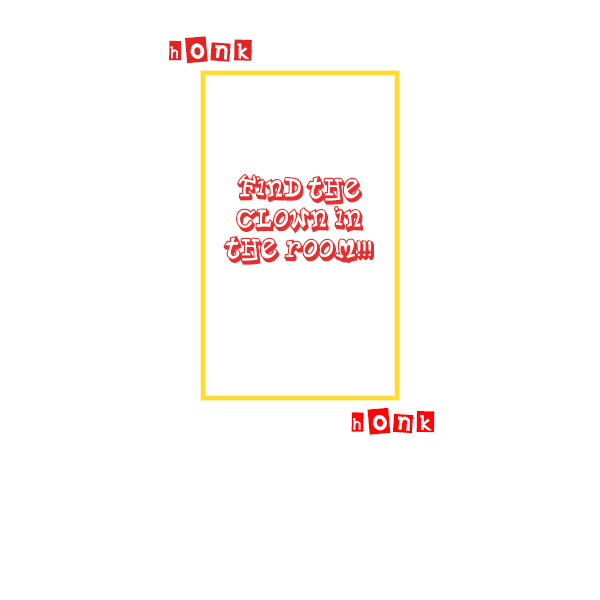
<style>
.page{position:relative;width:600px;height:600px;background:#ffffff}
.page>*{position:absolute;margin:0}
.t1{font:37px "EarwigFactory";color:#e32425}
.t2{font:25px "PlanetBenson2";color:#e53031}
.t3{font:37px "EarwigFactory";color:#ff0606}
</style>
<div class="page">
<p class="t1" style="left:169px;top:36px;width:83px;height:28px">honk</p>
<p class="t2" style="left:223px;top:174px;width:152px;height:91px;text-align:center">Find the<br>clown in<br>the room!!!</p>
<p class="t3" style="left:351px;top:407px;width:84px;height:28px">honk</p>
</div>
